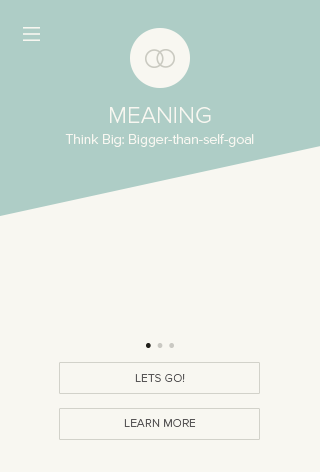
<style>
.page{position:relative;width:320px;height:472px;background:#f8f7f1}
.page>*{position:absolute;margin:0}
.t1{font:14px/16px "ProximaNova-Light";color:#f8f7f1}
.t2{font:24px/13px "ProximaNova-Light";color:#f8f7f1}
.t3{font:12px "ProximaNova-Light";color:#585657}
</style>
<div class="page">
<p class="t1" style="left:65px;top:107px;width:189px;height:40px;text-align:center"><span class="t2">MEANING<br></span>Think Big: Bigger-than-self-goal</p>
<p class="t3" style="left:135px;top:374px;width:50px;height:8px">LETS GO!</p>
<p class="t3" style="left:124px;top:419px;width:72px;height:8px">LEARN MORE</p>
</div>
